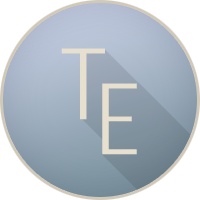
<style>
.page{position:relative;width:200px;height:200px;background:#ffffff}
.page>*{position:absolute;margin:0}
.t1{font:97.3px "ArvinLight-@";color:#e8e0cf;font-weight:bold}
</style>
<div class="page">
<p class="t1" style="left:61px;top:48px;width:44px;height:72px">T</p>
<p class="t1" style="left:102px;top:83px;width:35px;height:72px">E</p>
</div>
